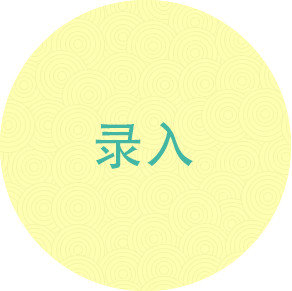
<style>
.page{position:relative;width:292px;height:291px;background:#ffffb2}
.page>*{position:absolute;margin:0}
.t1{font:51.9px "AdobeHeitiStd-Regular";color:#41b7a4}
</style>
<div class="page">
<p class="t1" style="left:95px;top:122px;width:98px;height:47px">录入</p>
</div>
